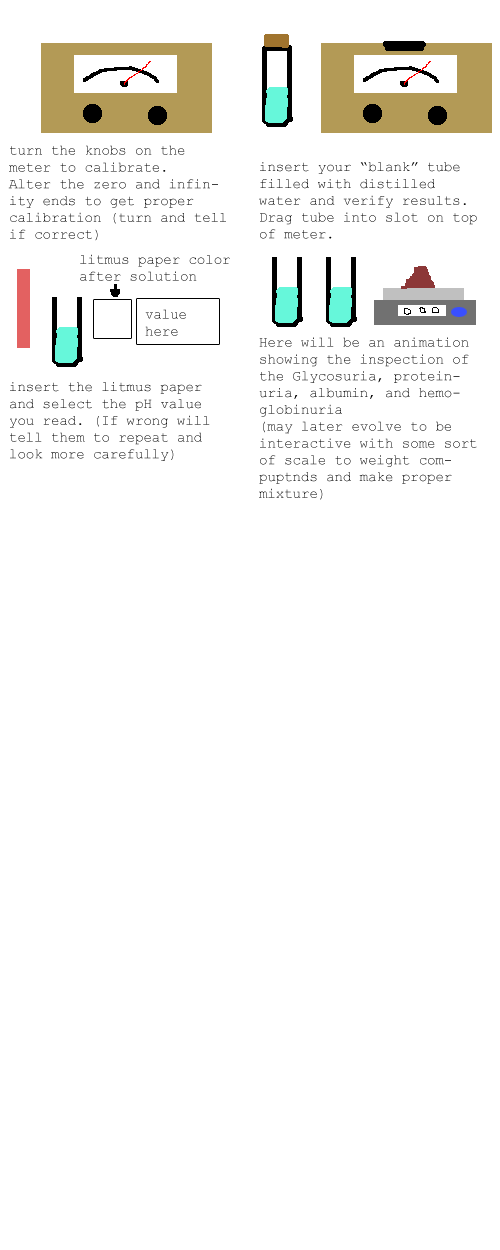
<style>
.page{position:relative;width:500px;height:1250px;background:#ffffff}
.page>*{position:absolute;margin:0}
.t1{font:14px "CourierNewPSMT"}
.t2{font:14px "CourierNewPSMT";color:#000000}
</style>
<div class="page">
<p class="t1" style="left:8px;top:145px;width:218px;height:96px">turn the knobs on the meter to calibrate.<br>Alter the zero and infinity ends to get proper calibration (turn and tell if correct)</p>
<p class="t2" style="left:259px;top:162px;width:218px;height:77px">insert your “blank” tube filled with distilled water and verify results.<br>Drag tube into slot on top of meter.</p>
<p class="t1" style="left:80px;top:254px;width:150px;height:27px">litmus paper color after solution</p>
<p class="t1" style="left:145px;top:309px;width:41px;height:27px">value here</p>
<p class="t2" style="left:259px;top:337px;width:218px;height:163px">Here will be an animation showing the inspection of the Glycosuria, proteinuria, albumin, and hemoglobinuria<br>(may later evolve to be interactive with some sort of scale to weight compuptnds and make proper mixture)</p>
<p class="t2" style="left:10px;top:382px;width:200px;height:79px">insert the litmus paper and select the pH value you read. (If wrong will tell them to repeat and look more carefully)</p>
</div>
